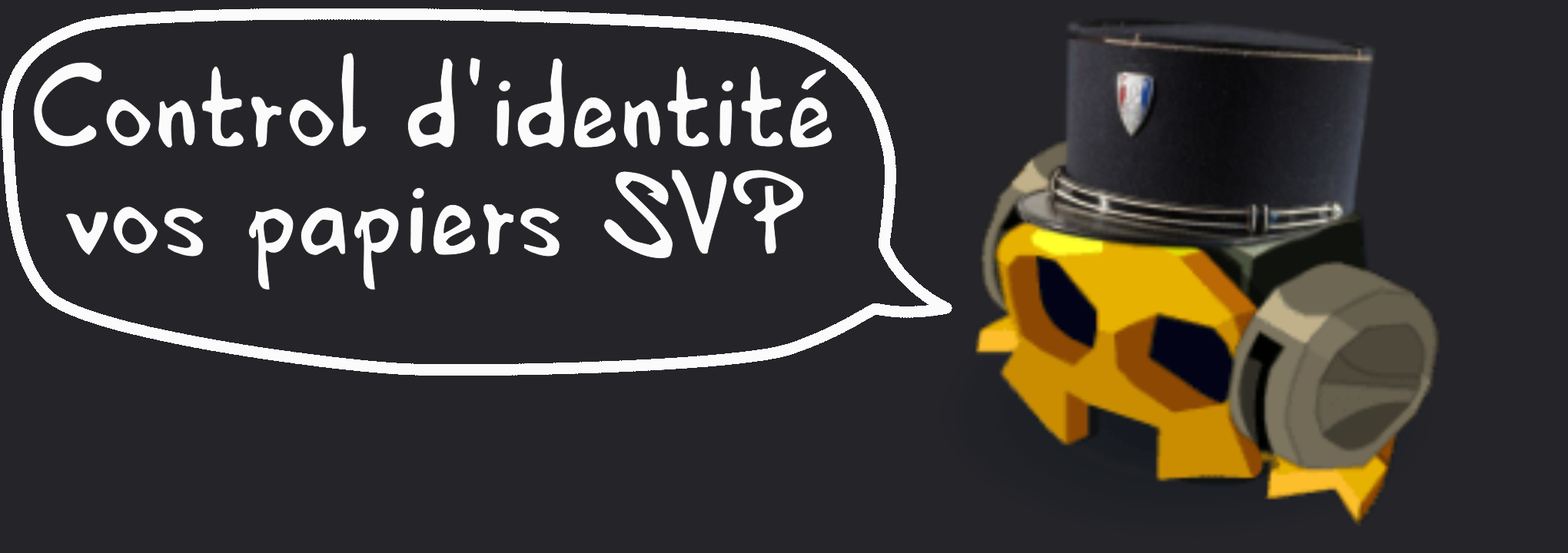
<style>
.page{position:relative;width:1568px;height:553px;background:#242429}
.page>*{position:absolute;margin:0}
.t1{font:123.5px "HVDEdding780-Normal";color:#fbfbfb}
</style>
<div class="page">
<p class="t1" style="left:32px;top:51px;width:803px;height:242px;text-align:center">Control d'identité<br>vos papiers SVP</p>
</div>
